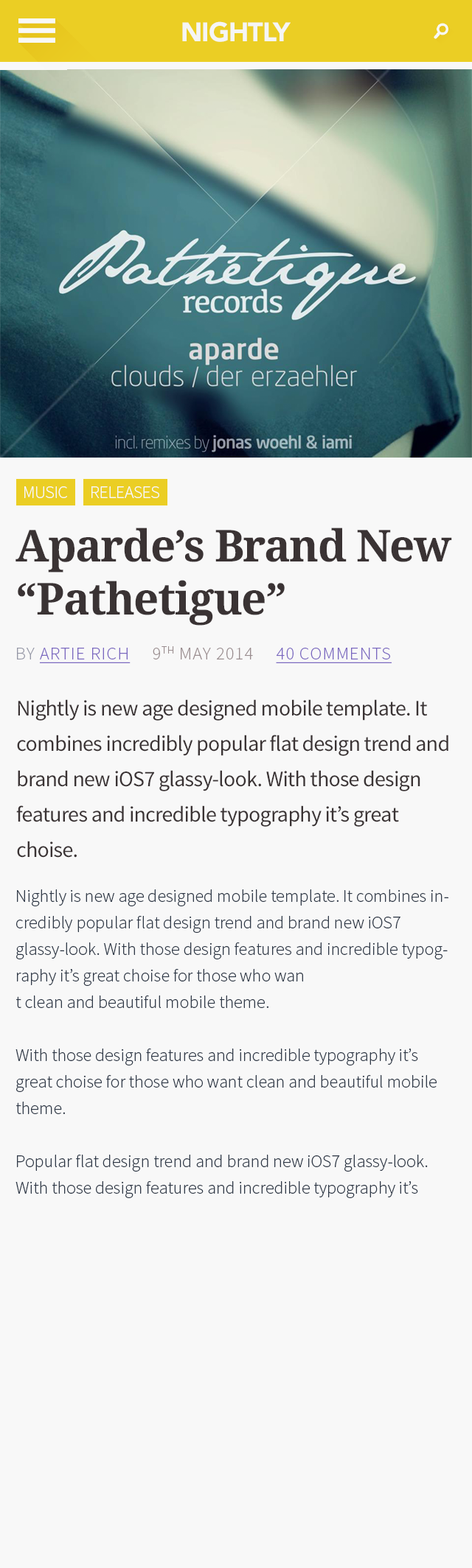
<style>
.page{position:relative;width:472px;height:1568px;background:#f8f8f8}
.page>*{position:absolute;margin:0}
.t1{font:26.5px "Avenir-Black";letter-spacing:-0.025em;color:#f5f5f5;text-transform:uppercase}
.t2{font:17.8px "SourceSansPro-Light";letter-spacing:-0.025em;color:#f8f8f8;text-transform:uppercase}
.t3{font:44.2px "DroidSerif-Bold";letter-spacing:-0.025em;color:#3a3334}
.t4{font:17.6px "SourceSansPro-Light";letter-spacing:0.05em;color:#9a8d8f;text-transform:uppercase}
.t5{font:17.6px "SourceSansPro-Light";letter-spacing:0.05em;color:#9597a6;text-transform:uppercase}
.t6{font:17.6px "SourceSansPro-Light";letter-spacing:0.05em;color:#7a67c0;text-transform:uppercase;text-decoration:underline}
.t7{font:22.1px/35.4px "SourceSansPro-Regular";letter-spacing:-0.025em;color:#3a3334}
.t8{font:17.7px/26.5px "SourceSansPro-Light";color:#2f3948}
</style>
<div class="page">
<p class="t1" style="left:182px;top:21px;width:108px;height:21px">Nightly</p>
<p class="t2" style="left:24px;top:486px;width:43px;height:12px">music</p>
<p class="t2" style="left:91px;top:486px;width:68px;height:12px">RELEASES</p>
<p class="t3" style="left:15px;top:528px;width:437px;height:98px">Aparde’s Brand New “Pathetigue”</p>
<p class="t4" style="left:17px;top:646px;width:374px;height:17px"><span class="t5">by </span><span class="t6">Artie Rich     </span>9th may 2014     <span class="t6">40 comments</span></p>
<p class="t7" style="left:16px;top:699px;width:432px;height:159px">Nightly is new age designed mobile template. It combines incredibly popular flat design trend and brand new iOS7 glassy-look. With those design features and incredible typography it’s great choise.</p>
<p class="t8" style="left:15px;top:889px;width:433px;height:309px">Nightly is new age designed mobile template. It combines incredibly popular flat design trend and brand new iOS7 glassy-look. With those design features and incredible typography it’s great choise for those who wan<br>t clean and beautiful mobile theme.<br><br>With those design features and incredible typography it’s great choise for those who want clean and beautiful mobile theme.<br><br>Popular flat design trend and brand new iOS7 glassy-look. With those design features and incredible typography it’s great choise for those.</p>
</div>
